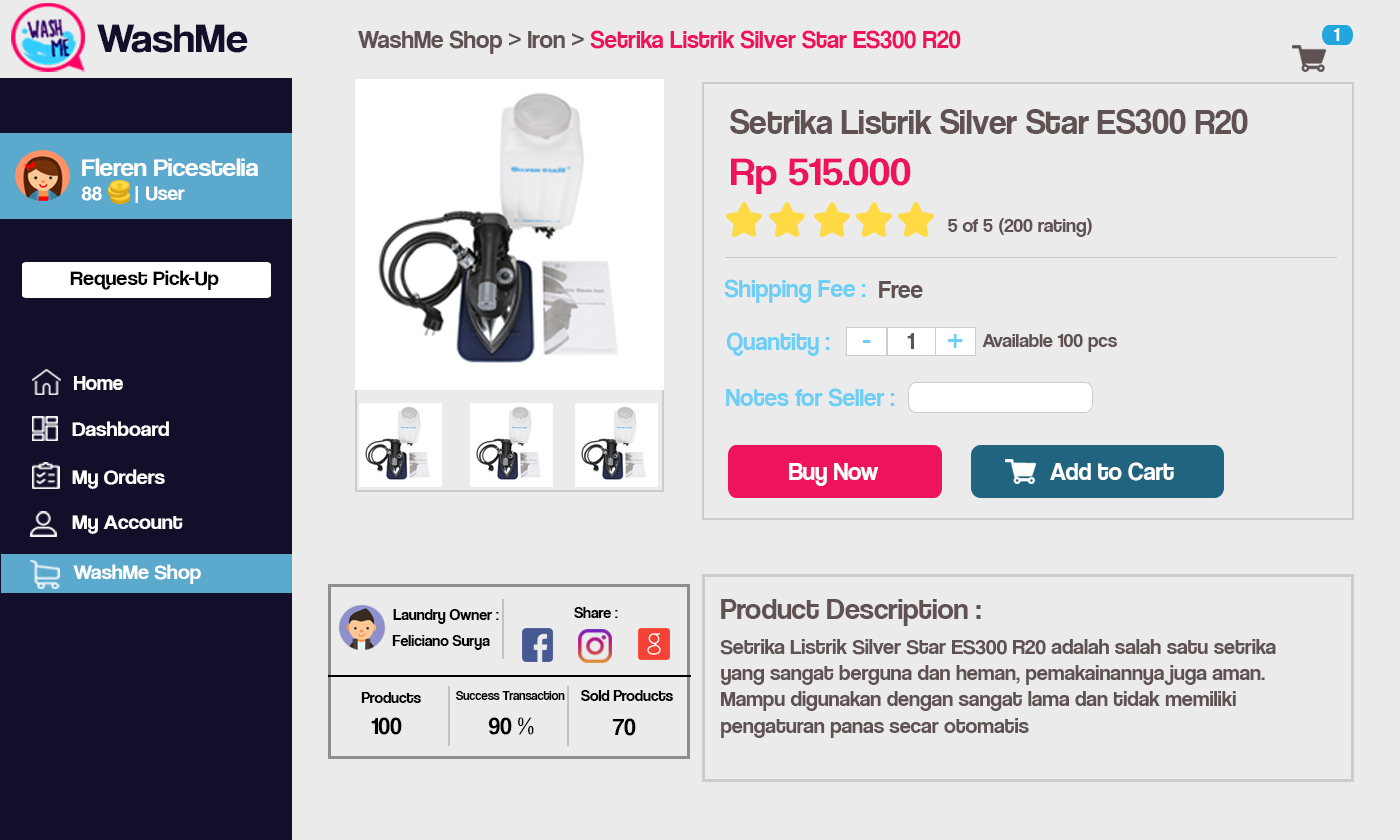
<style>
.page{position:relative;width:1400px;height:840px;background:#ebebeb}
.page>*{position:absolute;margin:0}
.t1{font:42.1px "CoolveticaRg-Regular";color:#120f2b;scale:1.05 1}
.t2{font:25px "CoolveticaRg-Regular";color:#ed145b}
.t3{font:25px "CoolveticaRg-Regular";color:#605252}
.t4{font:18.9px "CoolveticaRg-Regular";color:#ffffff}
.t5{font:35px "CoolveticaRg-Regular";color:#605252}
.t6{font:25.2px "CoolveticaRg-Regular";color:#ffffff;scale:1.05 1}
.t7{font:20px "CoolveticaRg-Regular";color:#ffffff;scale:1.05 1}
.t8{font:39.4px "CoolveticaRg-Regular";color:#ed145b;scale:1.1 1}
.t9{font:20px "CoolveticaRg-Regular";color:#605252}
.t10{font:21px "CoolveticaRg-Regular";color:#000000;scale:1.05 1}
.t11{font:25px "CoolveticaRg-Regular";color:#6dcff6}
.t12{font:30px "CoolveticaRg-Regular";color:#6dcff6}
.t13{font:24px "CoolveticaRg-Regular";color:#605252}
.t14{font:21px "CoolveticaRg-Regular";color:#ffffff}
.t15{font:21px "CoolveticaRg-Regular";color:#ffffff;scale:1.05 1}
.t16{font:25px "CoolveticaRg-Regular";color:#ffffff}
.t17{font:30px "CoolveticaRg-Regular";color:#605252}
.t18{font:16.3px "CoolveticaRg-Regular";color:#000000}
.t19{font:22px "CoolveticaRg-Regular";color:#605252}
.t20{font:13px "CoolveticaRg-Regular";color:#000000}
.t21{font:24.4px "CoolveticaRg-Regular";color:#000000}
</style>
<div class="page">
<p class="t1" style="left:97px;top:24px;width:151px;height:29px">WashMe</p>
<p class="t2" style="left:358px;top:30px;width:603px;height:24px"><span class="t3">WashMe Shop &gt; Iron &gt; </span>Setrika Listrik Silver Star ES300 R20</p>
<p class="t4" style="left:1334px;top:28px;width:6px;height:13px">1</p>
<p class="t5" style="left:730px;top:109px;width:518px;height:25px">Setrika Listrik Silver Star ES300 R20</p>
<p class="t6" style="left:81px;top:158px;width:177px;height:45px">Fleren Picestelia<br><span class="t7">88      | User</span></p>
<p class="t8" style="left:731px;top:158px;width:180px;height:36px">Rp 515.000</p>
<p class="t9" style="left:948px;top:218px;width:144px;height:19px">5 of 5 (200 rating)</p>
<p class="t10" style="left:70px;top:270px;width:149px;height:20px">Request Pick-Up</p>
<p class="t11" style="left:724px;top:279px;width:142px;height:24px">Shipping Fee :</p>
<p class="t3" style="left:879px;top:281px;width:44px;height:17px">Free</p>
<p class="t11" style="left:726px;top:332px;width:104px;height:24px">Quantity :</p>
<p class="t12" style="left:862px;top:340px;width:9px;height:3px">-</p>
<p class="t13" style="left:907px;top:333px;width:7px;height:16px">1</p>
<p class="t12" style="left:948px;top:334px;width:15px;height:14px">+</p>
<p class="t9" style="left:982px;top:334px;width:135px;height:18px">Available 100 pcs</p>
<p class="t14" style="left:74px;top:376px;width:49px;height:14px">Home</p>
<p class="t11" style="left:726px;top:388px;width:169px;height:19px">Notes for Seller :</p>
<p class="t15" style="left:72px;top:421px;width:97px;height:15px">Dashboard</p>
<p class="t16" style="left:1050px;top:462px;width:124px;height:19px">Add to Cart</p>
<p class="t15" style="left:72px;top:469px;width:93px;height:20px">My Orders</p>
<p class="t16" style="left:789px;top:463px;width:90px;height:23px">Buy Now</p>
<p class="t15" style="left:72px;top:515px;width:111px;height:19px">My Account</p>
<p class="t15" style="left:73px;top:564px;width:128px;height:20px">WashMe Shop</p>
<p class="t17" style="left:721px;top:599px;width:260px;height:27px">Product Description :</p>
<p class="t18" style="left:393px;top:609px;width:106px;height:15px">Laundry Owner :</p>
<p class="t18" style="left:574px;top:607px;width:44px;height:11px">Share :</p>
<p class="t18" style="left:392px;top:635px;width:98px;height:15px">Feliciano Surya</p>
<p class="t19" style="left:720px;top:639px;width:556px;height:99px">Setrika Listrik Silver Star ES300 R20 adalah salah satu setrika <br>yang sangat berguna dan heman, pemakainannya juga aman. <br>Mampu digunakan dengan sangat lama dan tidak memiliki <br>pengaturan panas secar otomatis</p>
<p class="t18" style="left:361px;top:692px;width:60px;height:11px">Products</p>
<p class="t20" style="left:456px;top:691px;width:109px;height:9px">Success Transaction</p>
<p class="t18" style="left:581px;top:690px;width:92px;height:11px">Sold Products</p>
<p class="t21" style="left:371px;top:717px;width:31px;height:18px">100</p>
<p class="t21" style="left:488px;top:717px;width:46px;height:18px">90 %</p>
<p class="t21" style="left:612px;top:718px;width:24px;height:18px">70</p>
</div>
